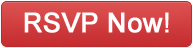
<style>
.page{position:relative;width:193px;height:48px}
.page>*{position:absolute;margin:0}
.t1{font:27px "ArialMT";color:#ffffff;font-weight:bold}
</style>
<div class="page">
<p class="t1" style="left:24px;top:12px;width:145px;height:21px">RSVP Now!</p>
</div>
